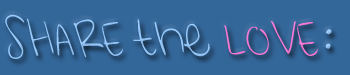
<style>
.page{position:relative;width:350px;height:75px;background:#336699}
.page>*{position:absolute;margin:0}
.t1{font:30px "ShiningLikeStars";color:#99ccff;scale:0.94 1}
.t2{font:30px "ShiningLikeStars";color:#ff7bd8;scale:0.94 1}
</style>
<div class="page">
<p class="t1" style="left:5px;top:14px;width:327px;height:45px">SHARE the <span class="t2">LOVE</span>:</p>
</div>
